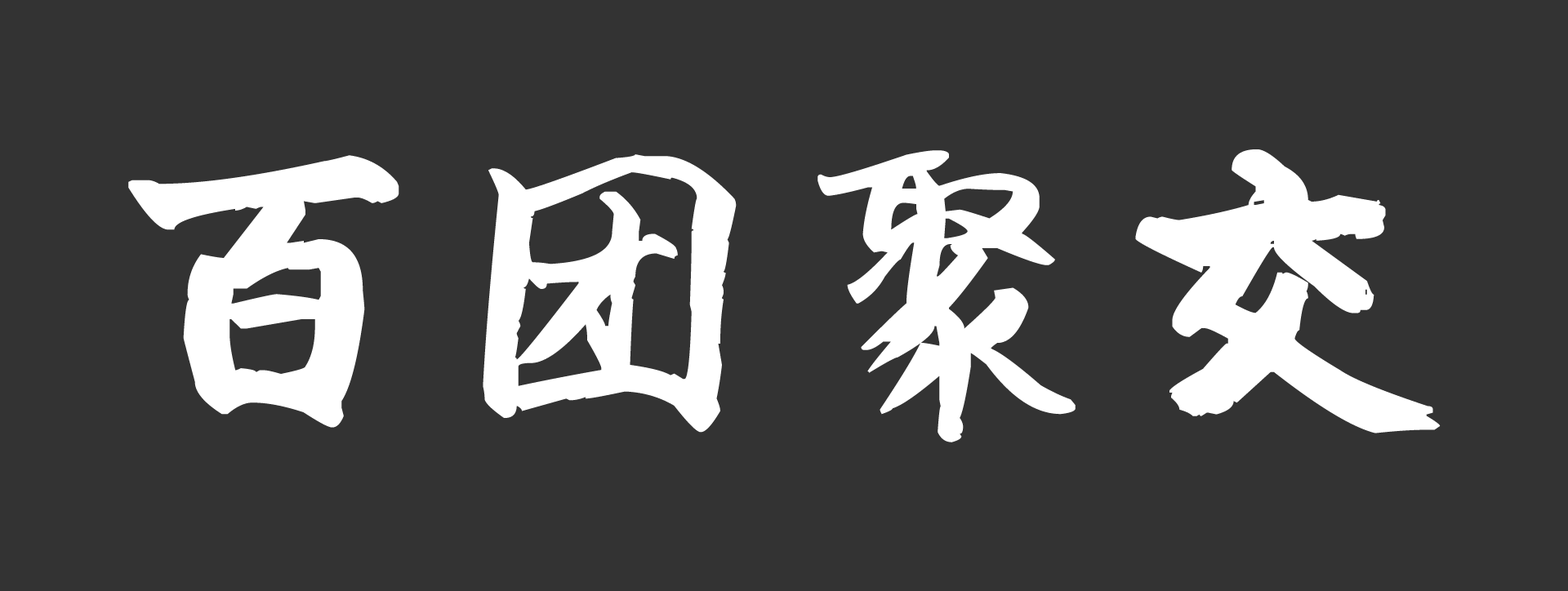
<style>
.page{position:relative;width:1568px;height:591px;background:#333333}
.page>*{position:absolute;margin:0}
.t1{font:335.4px "NGlipingshouxie_1";letter-spacing:0.02em;color:#ffffff;text-transform:uppercase}
</style>
<div class="page">
<p class="t1" style="left:128px;top:149px;width:1313px;height:294px">百团聚交</p>
</div>
